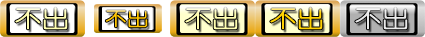
<style>
.page{position:relative;width:425px;height:37px}
.page>*{position:absolute;margin:0}
.t1{font:18.6px "YouYuan";color:#ffc600;font-weight:bold;scale:1.14 1}
.t2{font:23.3px "YouYuan";color:#ffd100;font-weight:bold;scale:1.14 1}
.t3{font:23.3px "YouYuan";color:#eaeaea;font-weight:bold;scale:1.14 1}
</style>
<div class="page">
<p class="t1" style="left:105px;top:9px;width:43px;height:19px">不出</p>
<p class="t2" style="left:270px;top:7px;width:53px;height:23px">不出</p>
<p class="t3" style="left:355px;top:7px;width:53px;height:23px">不出</p>
</div>
